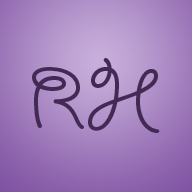
<style>
.page{position:relative;width:192px;height:192px}
.page>*{position:absolute;margin:0}
.t1{font:93px "GiddyupStd";color:#422a54}
</style>
<div class="page">
<p class="t1" style="left:32px;top:58px;width:128px;height:75px">RH</p>
</div>
